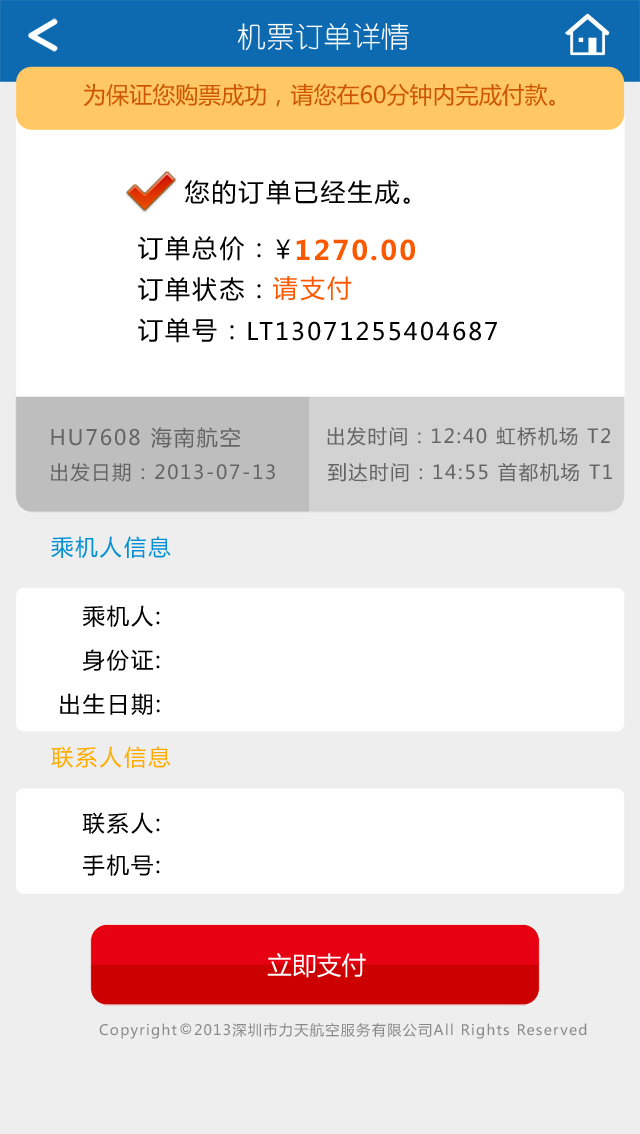
<style>
.page{position:relative;width:640px;height:1134px;background:#ffffff}
.page>*{position:absolute;margin:0}
.t1{font:28.8px "YouYuan";color:#ffffff}
.t2{font:23px "MicrosoftYaHei";color:#cd5602}
.t3{font:25px "MicrosoftYaHei";letter-spacing:0.09em;color:#000000}
.t4{font:26.9px "MicrosoftYaHei-Bold";letter-spacing:0.09em;color:#fa5900}
.t5{font:25px "MicrosoftYaHei";letter-spacing:0.09em;color:#fa5900}
.t6{font:23.8px "MicrosoftYaHei";letter-spacing:0.09em;color:#000000}
.t7{font:21.1px "MicrosoftYaHei";letter-spacing:0.09em;color:#646464}
.t8{font:19.2px "MicrosoftYaHei";letter-spacing:0.09em;color:#646464}
.t9{font:22.3px "MicrosoftYaHei";letter-spacing:0.09em;color:#028fd4}
.t10{font:22.3px "MicrosoftYaHei";letter-spacing:0.09em;color:#000000}
.t11{font:22.3px "MicrosoftYaHei";letter-spacing:0.09em;color:#ffac00}
.t12{font:25px "MicrosoftYaHei";color:#fefefe}
.t13{font:14.2px "MicrosoftYaHei";letter-spacing:0.09em;color:#898989}
</style>
<div class="page">
<p class="t1" style="left:238px;top:23px;width:171px;height:28px">机票订单详情</p>
<p class="t2" style="left:83px;top:83px;width:472px;height:24px">为保证您购票成功，请您在60分钟内完成付款。</p>
<p class="t3" style="left:184px;top:180px;width:226px;height:25px">您的订单已经生成。</p>
<p class="t3" style="left:138px;top:236px;width:123px;height:25px">订单总价：</p>
<p class="t4" style="left:296px;top:239px;width:119px;height:22px">1270.00</p>
<p class="t3" style="left:138px;top:277px;width:123px;height:25px">订单状态：</p>
<p class="t5" style="left:273px;top:276px;width:79px;height:25px">请支付</p>
<p class="t3" style="left:138px;top:318px;width:96px;height:25px">订单号：</p>
<p class="t6" style="left:248px;top:321px;width:249px;height:20px">LT13071255404687</p>
<p class="t7" style="left:51px;top:427px;width:190px;height:21px">HU7608 海南航空</p>
<p class="t8" style="left:327px;top:427px;width:283px;height:19px">出发时间：12:40 虹桥机场 T2</p>
<p class="t8" style="left:51px;top:463px;width:224px;height:19px">出发日期：2013-07-13</p>
<p class="t8" style="left:327px;top:463px;width:285px;height:19px">到达时间：14:55 首都机场 T1</p>
<p class="t9" style="left:51px;top:536px;width:120px;height:22px">乘机人信息</p>
<p class="t10" style="left:83px;top:605px;width:77px;height:22px">乘机人:</p>
<p class="t10" style="left:83px;top:649px;width:77px;height:22px">身份证:</p>
<p class="t10" style="left:60px;top:693px;width:100px;height:22px">出生日期:</p>
<p class="t11" style="left:51px;top:746px;width:120px;height:22px">联系人信息</p>
<p class="t10" style="left:82px;top:812px;width:78px;height:22px">联系人:</p>
<p class="t10" style="left:83px;top:854px;width:77px;height:22px">手机号:</p>
<p class="t12" style="left:267px;top:953px;width:99px;height:25px">立即支付</p>
<p class="t13" style="left:99px;top:1023px;width:78px;height:16px">Copyright</p>
<p class="t13" style="left:194px;top:1023px;width:393px;height:16px">2013深圳市力天航空服务有限公司All Rights Reserved</p>
</div>
